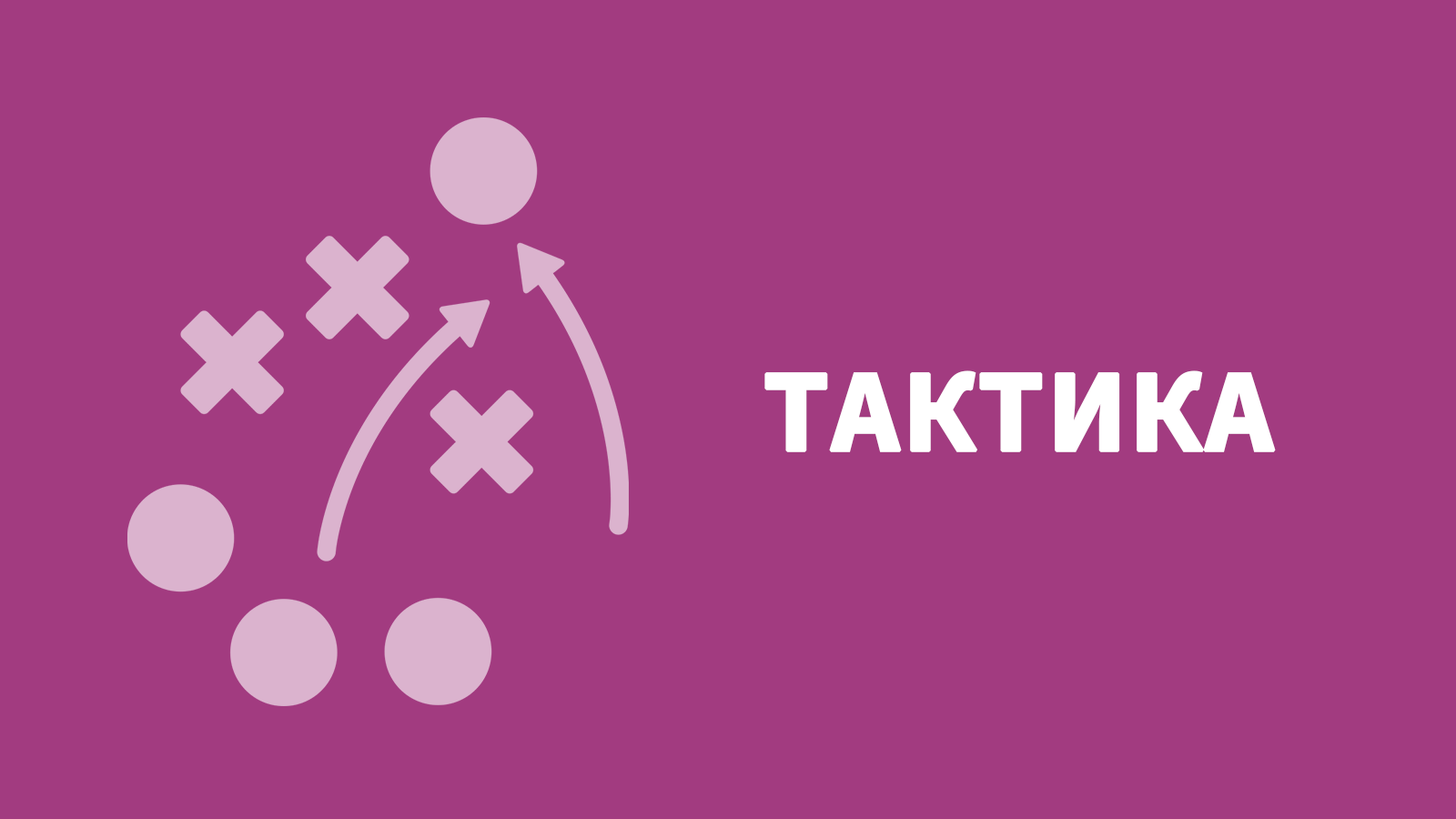
<style>
.page{position:relative;width:1456px;height:819px;background:#a23b80}
.page>*{position:absolute;margin:0}
.t1{font:117.4px "SourceSansPro-Bold";color:#ffffff;text-transform:uppercase;font-weight:bold}
</style>
<div class="page">
<p class="t1" style="left:764px;top:370px;width:512px;height:82px">тактика</p>
</div>
